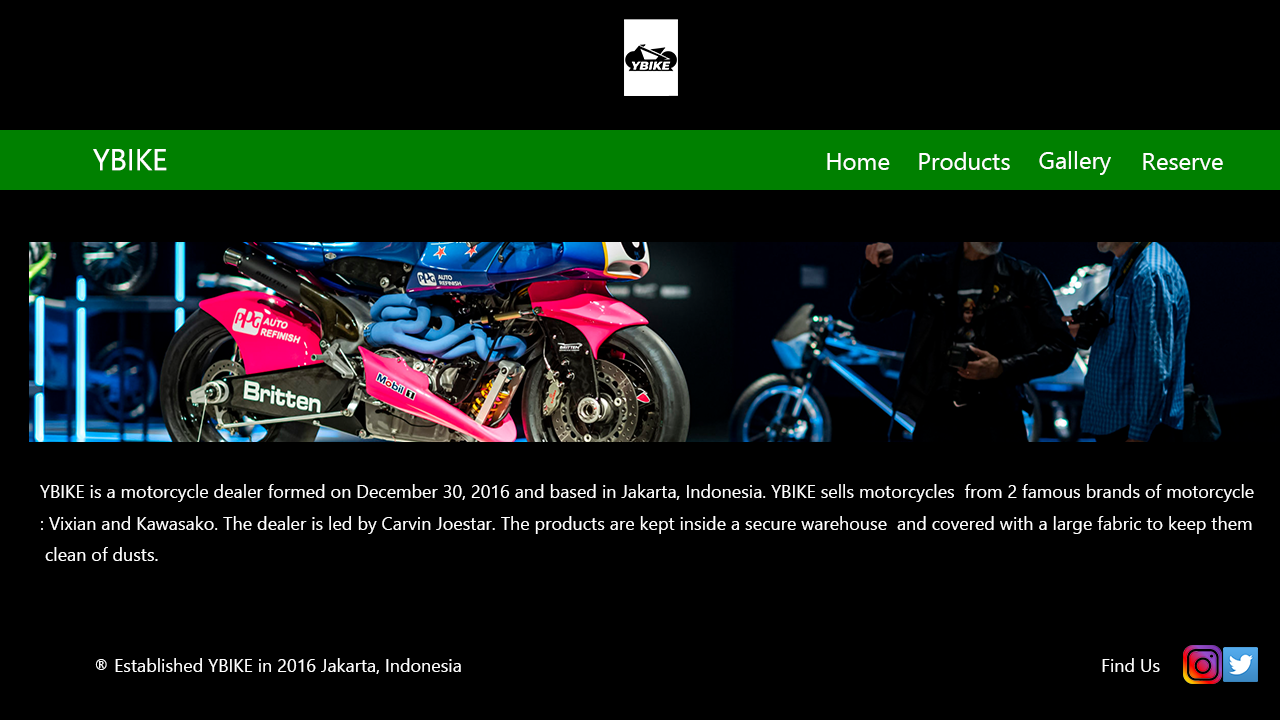
<style>
.page{position:relative;width:1280px;height:720px;background:#000000}
.page>*{position:absolute;margin:0}
.t1{font:30px "SegoeUI";color:#ffffff}
.t2{font:24px "SegoeUI";color:#ffffff}
.t3{font:18px "SegoeUI";color:#ffffff}
</style>
<div class="page">
<p class="t1" style="left:93px;top:149px;width:74px;height:22px">YBIKE</p>
<p class="t2" style="left:827px;top:153px;width:63px;height:17px">Home</p>
<p class="t2" style="left:919px;top:152px;width:91px;height:18px">Products</p>
<p class="t2" style="left:1039px;top:151px;width:72px;height:24px">Gallery</p>
<p class="t2" style="left:1143px;top:153px;width:80px;height:17px">Reserve</p>
<p class="t3" style="left:40px;top:484px;width:1214px;height:77px">YBIKE is a motorcycle dealer formed on December 30, 2016 and based in Jakarta, Indonesia. YBIKE sells motorcycles  from 2 famous brands of motorcycle<br>: Vixian and Kawasako. The dealer is led by Carvin Joestar. The products are kept inside a secure warehouse  and covered with a large fabric to keep them<br> clean of dusts.</p>
<p class="t3" style="left:95px;top:658px;width:1065px;height:16px">® Established YBIKE in 2016 Jakarta, Indonesia                  Find Us</p>
</div>
